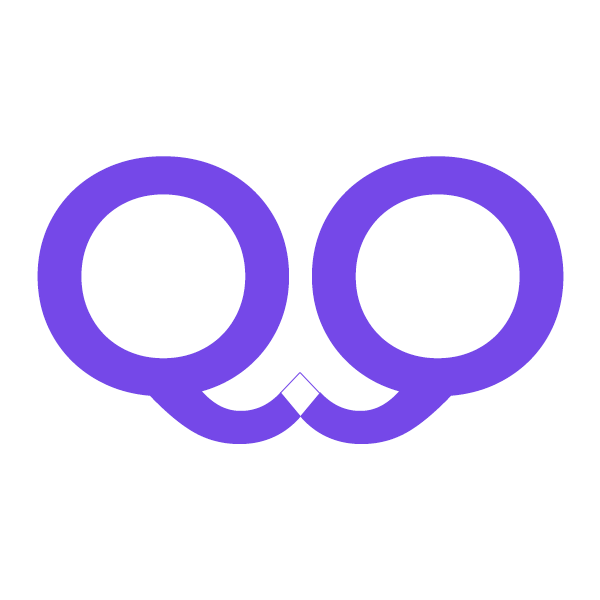
<style>
.page{position:relative;width:600px;height:600px;background:#ffffff}
.page>*{position:absolute;margin:0}
.t1{font:333.3px "Montserrat-SemiBold";letter-spacing:0.05em;color:#7548e8}
</style>
<div class="page">
<p class="t1" style="left:37px;top:156px;width:264px;height:288px">Q</p>
<p class="t1" style="left:300px;top:156px;width:264px;height:288px;rotate:180deg">Q</p>
</div>
